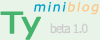
<style>
.page{position:relative;width:100px;height:40px;background:#e9f4e9}
.page>*{position:absolute;margin:0}
.t1{font:22px "Verdana";letter-spacing:0.12em;color:#02a1cc;font-style:italic}
.t2{font:22px "Verdana";letter-spacing:0.12em;color:#fac98b;font-style:italic}
.t3{font:50.3px "Verdana";letter-spacing:-0.08em;color:#46b46c;font-weight:bold;scale:1.19 1}
.t4{font:21.4px "Verdana";letter-spacing:-0.1em;color:#cccccc;scale:0.87 1}
</style>
<div class="page">
<p class="t1" style="left:34px;top:1px;width:65px;height:14px">mini<span class="t2">blog</span></p>
<p class="t3" style="left:0px;top:11px;width:41px;height:29px">Ty</p>
<p class="t4" style="left:50px;top:23px;width:38px;height:11px">beta 1.0</p>
</div>
